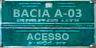
<style>
.page{position:relative;width:96px;height:48px}
.page>*{position:absolute;margin:0}
.t1{font:12px "Calibri-Bold";letter-spacing:0.04em;color:#73bfc2;scale:1.15 1}
.t2{font:9.2px "Arial-BoldMT";letter-spacing:0.01em;color:#73bfc2;scale:1.09 1}
</style>
<div class="page">
<p class="t1" style="left:13px;top:9px;width:69px;height:9px">BACIA A-03</p>
<p class="t2" style="left:26px;top:33px;width:43px;height:7px">ACESSO</p>
</div>
